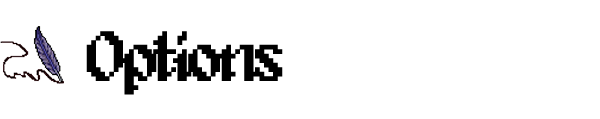
<style>
.page{position:relative;width:600px;height:119px;background:#ffffff}
.page>*{position:absolute;margin:0}
.t1{font:72px "Alagard";letter-spacing:-0.1em;color:#000000}
</style>
<div class="page">
<p class="t1" style="left:86px;top:31px;width:197px;height:64px">Options</p>
</div>
